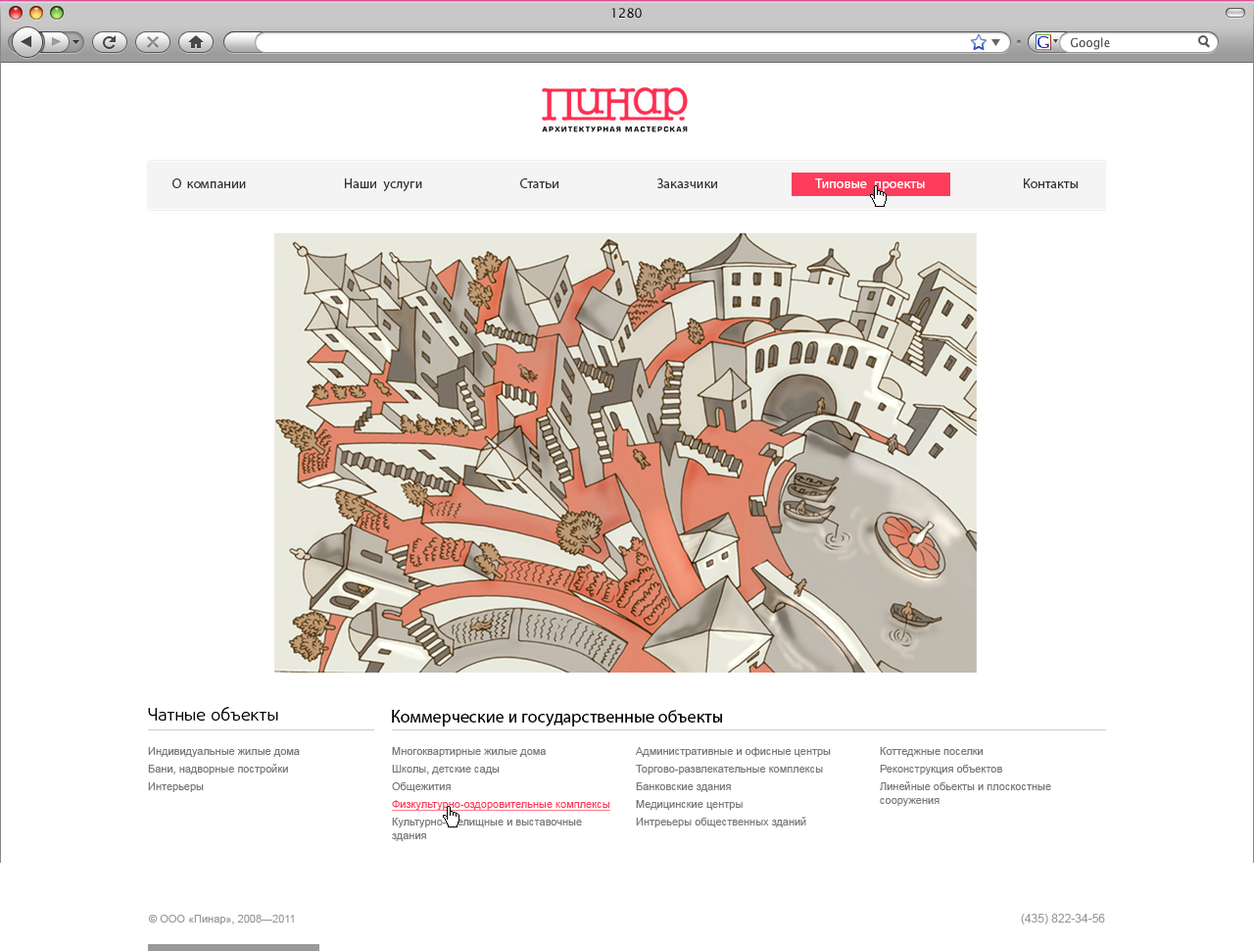
<style>
.page{position:relative;width:1254px;height:951px;background:#ffffff}
.page>*{position:absolute;margin:0}
.t1{font:12.7px "LucidaSansUnicode";color:#000000}
.t2{font:13.7px "MyriadPro-Regular";color:#323232}
.t3{font:17.6px "DaxlinePro-Light";color:#000000}
.t4{font:17.6px "MyriadPro-Regular";color:#000000}
.t5{font:10.8px/17.6px "ArialMT";color:#787878}
.t6{font:10.8px/23.5px "ArialMT";color:#787878}
.t7{font:10.8px/17.6px "ArialMT";color:#fe3c5c;text-decoration:underline}
.t8{font:10.8px/13.7px "ArialMT";color:#787878}
.t9{font:10.8px "ArialMT";color:#999999}
.t10{font:11.8px "ArialMT";color:#999999}
</style>
<div class="page">
<p class="t1" style="left:612px;top:8px;width:30px;height:11px">1280</p>
<p class="t2" style="left:172px;top:178px;width:906px;height:14px">Окомпании Нашиуслуги Статьи Заказчики Типовыепроекты Контакты</p>
<p class="t2" style="left:172px;top:178px;width:906px;height:14px">Окомпании Нашиуслуги Статьи Заказчики Типовыепроекты Контакты</p>
<p class="t3" style="left:148px;top:707px;width:130px;height:13px">Чатные объекты</p>
<p class="t4" style="left:392px;top:710px;width:330px;height:16px">Коммерческие и государственные объекты</p>
<p class="t5" style="left:148px;top:747px;width:152px;height:45px"><span class="t6">Индивидуальные жилые дома<br></span>Бани, надворные постройки<br>Интерьеры</p>
<p class="t5" style="left:392px;top:747px;width:219px;height:94px">Многоквартирные жилые дома<br>Школы, детские сады<br>Общежития<br><span class="t7">Физкультурно-оздоровительные комплексы<br></span>Культурно-зрелищные и выставочные <span class="t8">здания</span></p>
<p class="t5" style="left:635px;top:747px;width:196px;height:80px">Административные и офисные центры<br>Торгово-развлекательные комплексы<br>Банковские здания<br>Медицинские центры<br>Интреьеры общественных зданий</p>
<p class="t5" style="left:880px;top:747px;width:172px;height:59px">Коттеджные поселки<br>Реконструкция объектов<br>Линейные обьекты и плоскостные <span class="t8">сооружения</span></p>
<p class="t9" style="left:148px;top:914px;width:146px;height:10px">© ООО «Пинар», 2008—2011</p>
<p class="t10" style="left:1021px;top:913px;width:84px;height:11px">(435) 822-34-56</p>
</div>
